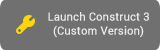
<style>
.page{position:relative;width:160px;height:50px;background:#707070}
.page>*{position:absolute;margin:0}
.t1{font:11px/14px "Roboto-Regular";color:#eaeaea;font-weight:bold}
</style>
<div class="page">
<p class="t1" style="left:48px;top:12px;width:101px;height:26px;text-align:center">Launch Construct 3<br>(Custom Version)</p>
</div>
